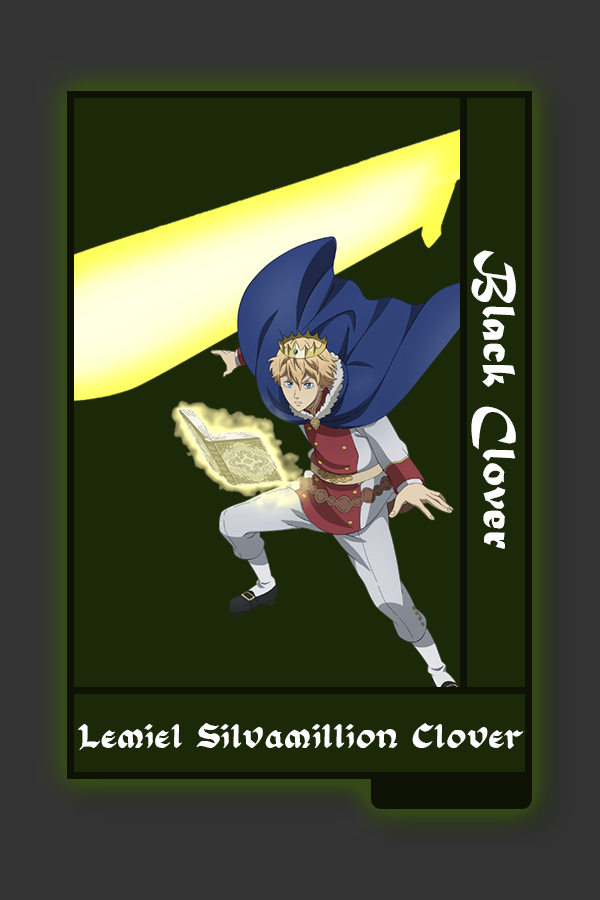
<style>
.page{position:relative;width:600px;height:900px;background:#1b2908}
.page>*{position:absolute;margin:0}
.t1{font:48.8px "MaturaMTScriptCapitals";color:#ffffff}
.t2{font:30.2px "FloranteatLaura";color:#ffffff}
</style>
<div class="page">
<p class="t1" style="left:471px;top:250px;width:45px;height:299px;rotate:90deg">Black Clover</p>
<p class="t2" style="left:78px;top:723px;width:446px;height:27px">Lemiel Silvamillion Clover</p>
</div>
